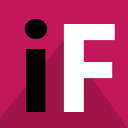
<style>
.page{position:relative;width:128px;height:128px;background:#c2185b}
.page>*{position:absolute;margin:0}
.t1{font:125.4px "SegoeUI-Bold";color:#020202}
.t2{font:125.4px "SegoeUI-Bold";color:#ffffff}
</style>
<div class="page">
<p class="t1" style="left:24px;top:19px;width:23px;height:93px">i</p>
<p class="t2" style="left:63px;top:24px;width:52px;height:88px">F</p>
</div>
